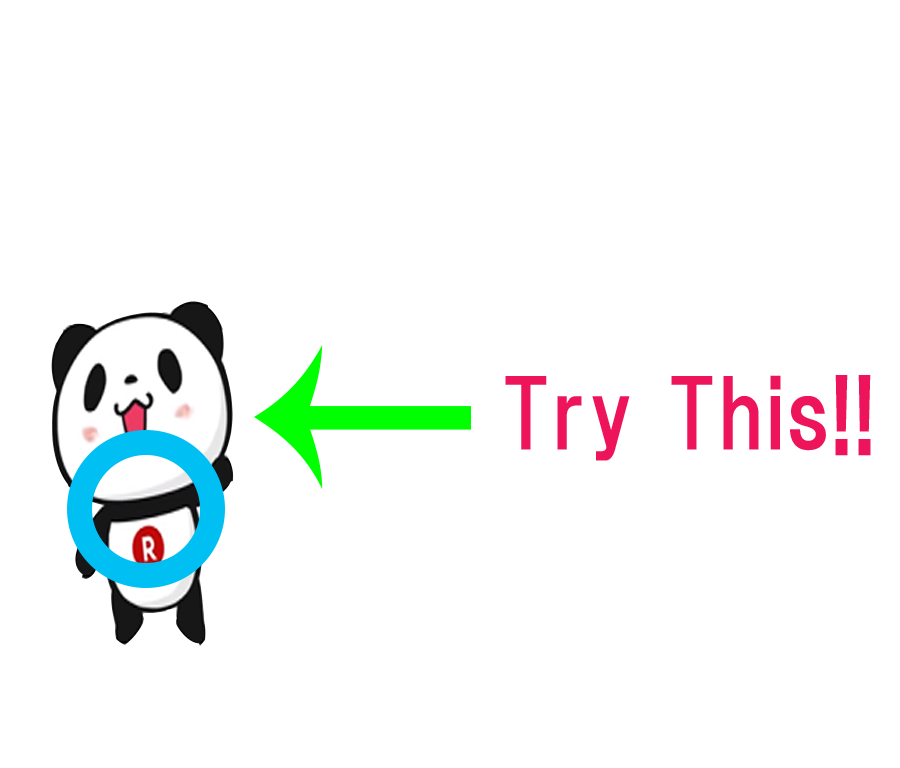
<style>
.page{position:relative;width:900px;height:768px;background:#ffffff}
.page>*{position:absolute;margin:0}
.t1{font:92px "HGPGothicE";color:#ed145b}
</style>
<div class="page">
<p class="t1" style="left:505px;top:375px;width:366px;height:86px">Try This!!</p>
</div>
